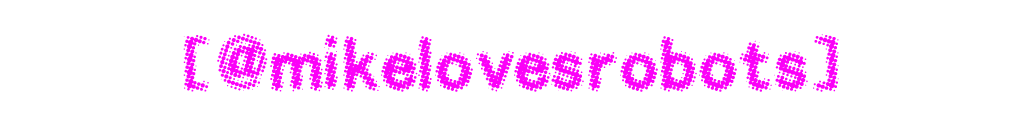
<style>
.page{position:relative;width:1024px;height:128px;background:#ffffff}
.page>*{position:absolute;margin:0}
.t1{font:61.9px "[NEWSPIC-FONT]";color:#fb00f8}
</style>
<div class="page">
<p class="t1" style="left:183px;top:33px;width:656px;height:59px">[@mikelovesrobots]</p>
</div>
